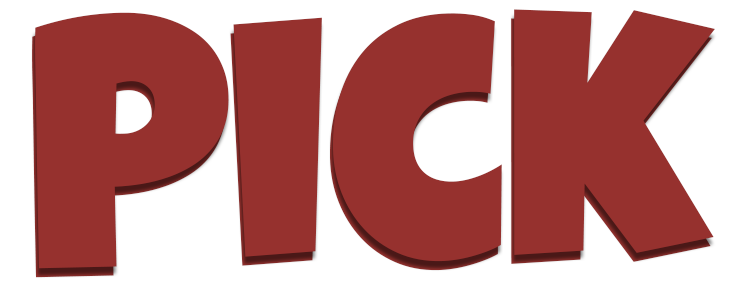
<style>
.page{position:relative;width:739px;height:301px;background:#96312e}
.page>*{position:absolute;margin:0}
.t1{font:350.8px "LuckiestGuy-Regular";color:#96312e}
</style>
<div class="page">
<p class="t1" style="left:35px;top:9px;width:680px;height:260px;rotate:-1deg">Pick</p>
<p class="t1" style="left:32px;top:18px;width:680px;height:260px;rotate:-1deg">Pick</p>
</div>
